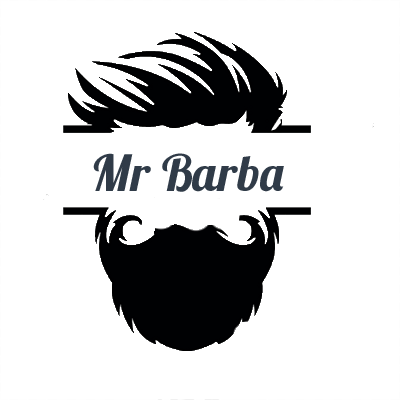
<style>
.page{position:relative;width:400px;height:400px;background:#ffffff}
.page>*{position:absolute;margin:0}
.t1{font:50px "Lobster1.3";color:#303b48}
</style>
<div class="page">
<p class="t1" style="left:93px;top:153px;width:191px;height:39px">Mr Barba</p>
</div>
